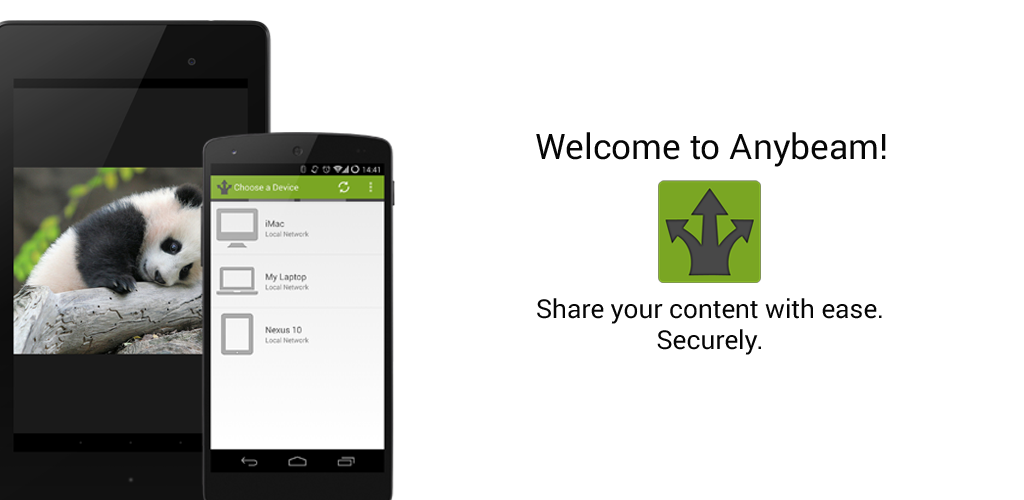
<style>
.page{position:relative;width:1024px;height:500px;background:#ffffff}
.page>*{position:absolute;margin:0}
.t1{font:35px "Roboto-Regular";color:#060606}
.t2{font:26px "Roboto-Regular";color:#060606}
</style>
<div class="page">
<p class="t1" style="left:536px;top:132px;width:350px;height:35px">Welcome to Anybeam!</p>
<p class="t2" style="left:537px;top:298px;width:345px;height:57px;text-align:center">Share your content with ease.<br>Securely.</p>
</div>
